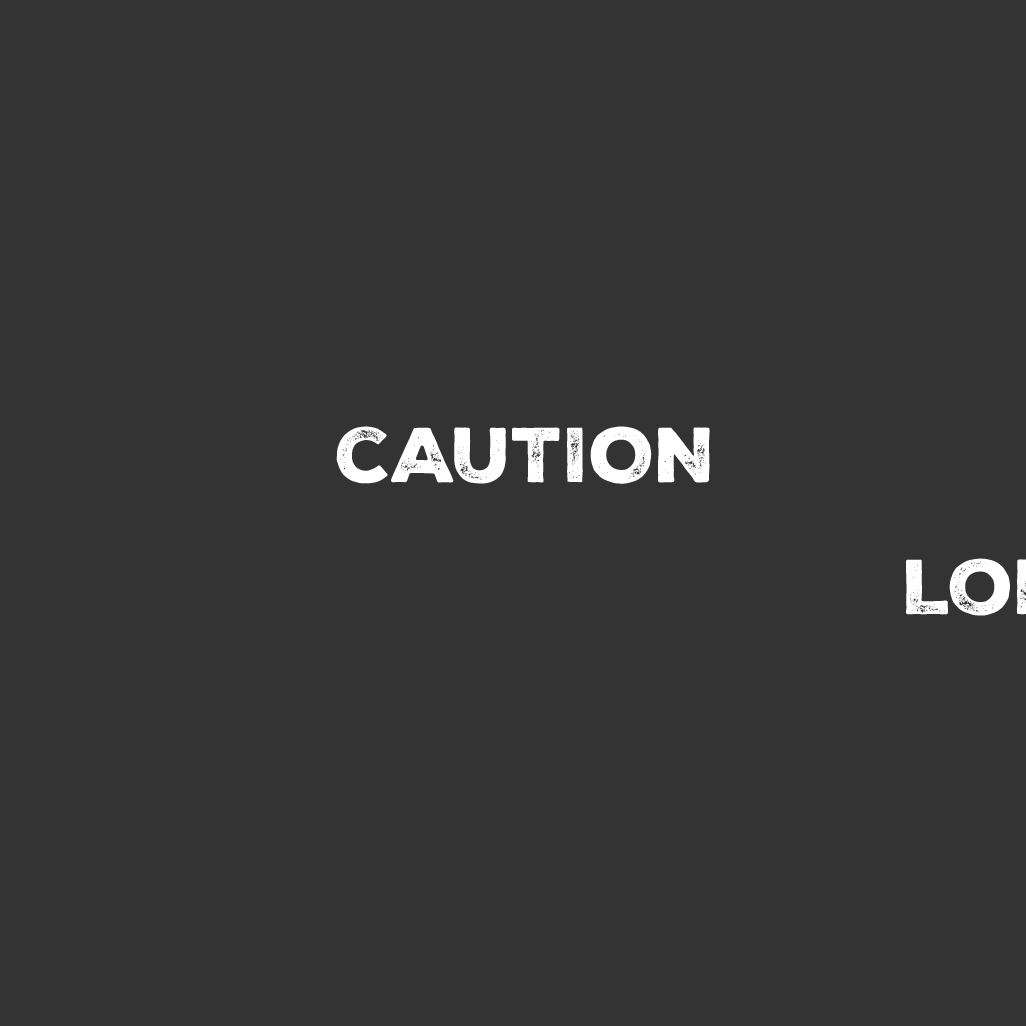
<style>
.page{position:relative;width:1026px;height:1026px;background:#333333}
.page>*{position:absolute;margin:0}
.t1{font:75px "NexaRustSans-Black2";color:#ffffff}
</style>
<div class="page">
<p class="t1" style="left:336px;top:426px;width:374px;height:58px">cAUTION</p>
</div>
